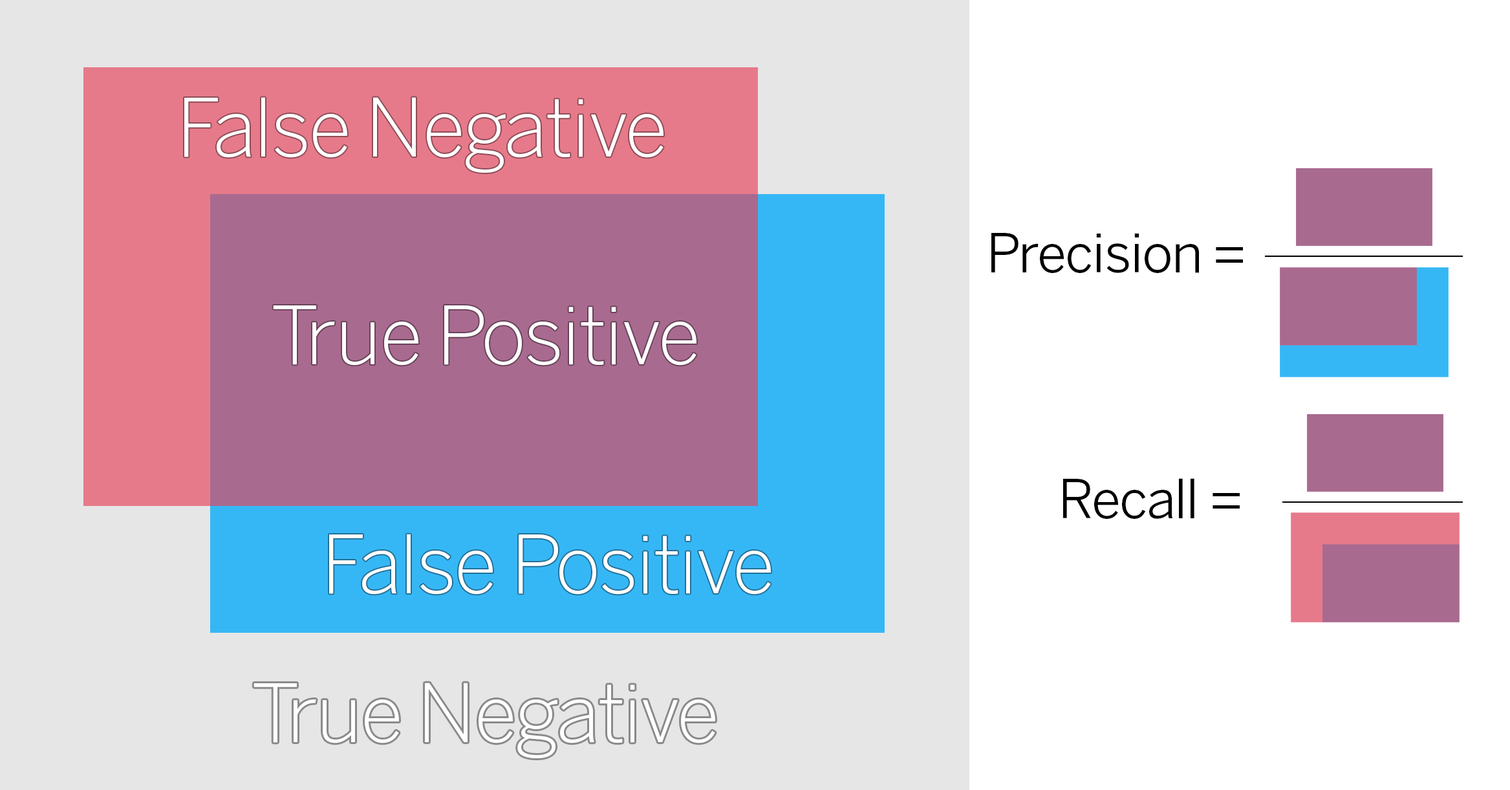
<style>
.page{position:relative;width:1510px;height:790px;background:#ffffff}
.page>*{position:absolute;margin:0}
.t1{font:79.7px "BentonSans-Light";letter-spacing:-0.02em;color:#ffffff}
.t2{font:53.5px "BentonSans-Book";letter-spacing:-0.02em;color:#000000}
</style>
<div class="page">
<p class="t1" style="left:184px;top:97px;width:480px;height:76px">False Negative</p>
<p class="t2" style="left:991px;top:233px;width:252px;height:40px">Precision =</p>
<p class="t1" style="left:273px;top:305px;width:424px;height:60px">True Positive</p>
<p class="t2" style="left:1063px;top:478px;width:177px;height:41px">Recall =</p>
<p class="t1" style="left:329px;top:534px;width:442px;height:60px">False Positive</p>
<p class="t1" style="left:254px;top:682px;width:461px;height:76px">True Negative</p>
</div>
